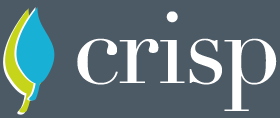
<style>
.page{position:relative;width:280px;height:118px;background:#4c5a66}
.page>*{position:absolute;margin:0}
.t1{font:100px "Didot";letter-spacing:-0.02em;color:#ffffff}
</style>
<div class="page">
<p class="t1" style="left:77px;top:11px;width:200px;height:100px">crisp</p>
</div>
